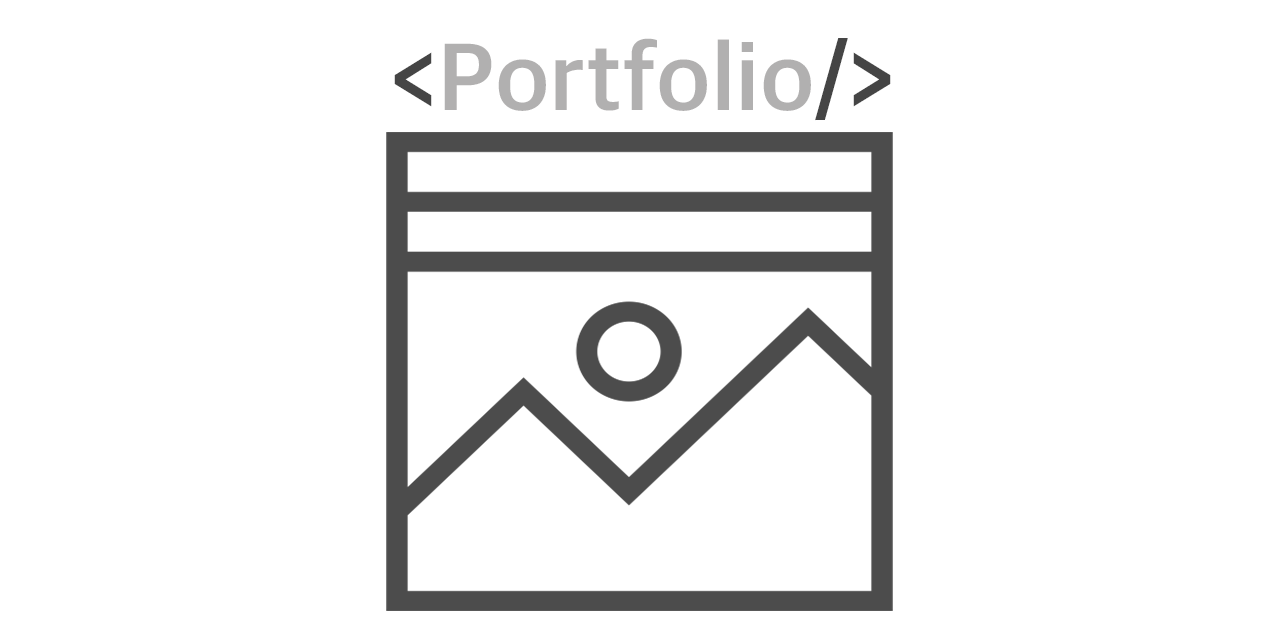
<style>
.page{position:relative;width:1280px;height:640px;background:#ffffff}
.page>*{position:absolute;margin:0}
.t1{font:96.6px "AppleSDGothicNeo-Bold";color:#b1b0b0}
.t2{font:96.6px "AppleSDGothicNeo-Bold";color:#454545}
</style>
<div class="page">
<p class="t1" style="left:394px;top:38px;width:497px;height:83px"><span class="t2">&lt;</span>Portfolio<span class="t2">/&gt;</span></p>
</div>
